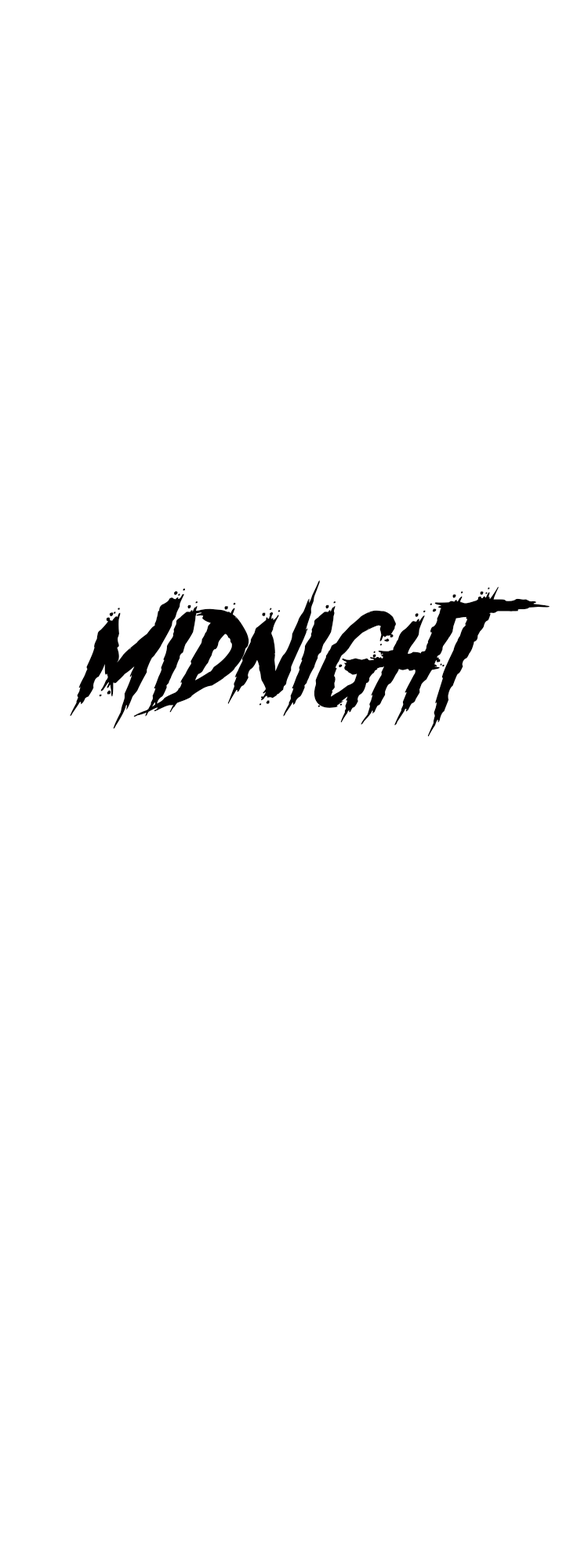
<style>
.page{position:relative;width:588px;height:1568px;background:#ffffff}
.page>*{position:absolute;margin:0}
.t1{font:109.8px "AnotherDangerSlantedDemo";letter-spacing:0.02em;color:#010000}
</style>
<div class="page">
<p class="t1" style="left:70px;top:580px;width:480px;height:157px">Midnight</p>
</div>
